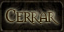
<style>
.page{position:relative;width:64px;height:32px}
.page>*{position:absolute;margin:0}
.t1{font:17px "Morpheus"}
</style>
<div class="page">
<p class="t1" style="left:5px;top:9px;width:55px;height:15px">Cerrar</p>
</div>
